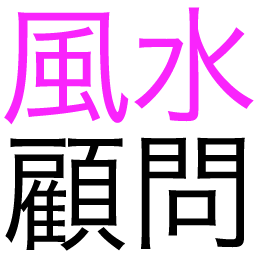
<style>
.page{position:relative;width:256px;height:256px;background:#ffffff}
.page>*{position:absolute;margin:0}
.t1{font:129.5px "HiraKakuProN-W3";color:#f924fc}
.t2{font:127.4px "HiraKakuProN-W3";color:#000000}
</style>
<div class="page">
<p class="t1" style="left:4px;top:7px;width:250px;height:118px">風水</p>
<p class="t2" style="left:5px;top:137px;width:240px;height:114px">顧問</p>
</div>
